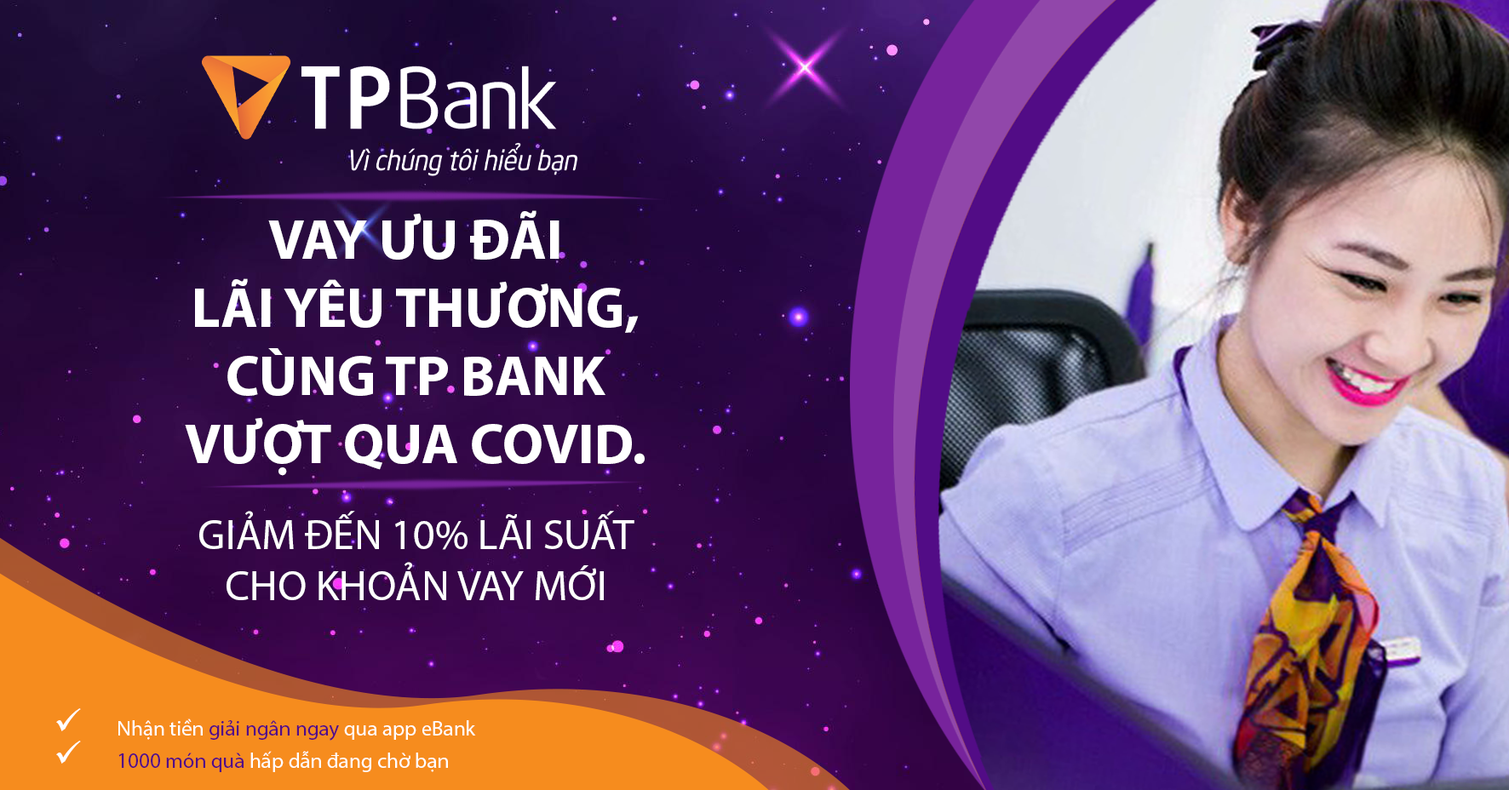
<style>
.page{position:relative;width:1509px;height:790px}
.page>*{position:absolute;margin:0}
.t1{font:56.8px "MyriadPro-Bold";color:#ffffff}
.t2{font:42.6px "MyriadPro-Regular";color:#ffffff}
</style>
<div class="page">
<p class="t1" style="left:185px;top:210px;width:460px;height:266px;text-align:center">VAY ƯU ĐÃI <br>LÃI YÊU THƯƠNG,<br>CÙNG TP BANK<br>VƯỢT QUA COVID.</p>
<p class="t2" style="left:199px;top:511px;width:435px;height:89px;text-align:center">GIẢM ĐẾN 10% LÃI SUẤT CHO KHOẢN VAY MỚI</p>
</div>
